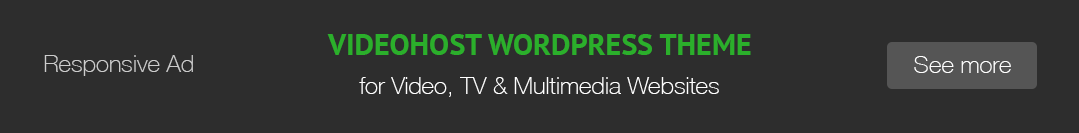
<style>
.page{position:relative;width:1079px;height:133px;background:#2d2d2d}
.page>*{position:absolute;margin:0}
.t1{font:30px "PTSans-Bold";color:#2baf2b}
.t2{font:24px "HelveticaNeue-Thin";color:#cccccc}
.t3{font:24px "HelveticaNeue-Thin";color:#ffffff}
</style>
<div class="page">
<p class="t1" style="left:327px;top:34px;width:424px;height:21px">VIDEOHOST WORDPRESS THEME</p>
<p class="t2" style="left:44px;top:55px;width:149px;height:21px">Responsive Ad</p>
<p class="t3" style="left:914px;top:56px;width:97px;height:17px">See more</p>
<p class="t3" style="left:359px;top:77px;width:360px;height:20px">for Video, TV &amp; Multimedia Websites</p>
</div>
